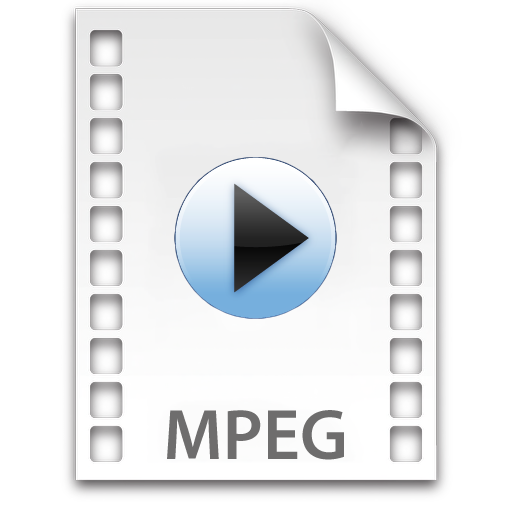
<style>
.page{position:relative;width:512px;height:512px;background:#ffffff}
.page>*{position:absolute;margin:0}
.t1{font:72px "MyriadPro-Semibold";color:#6e6d6d}
</style>
<div class="page">
<p class="t1" style="left:167px;top:410px;width:177px;height:50px">MPEG</p>
</div>
